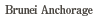
<style>
.page{position:relative;width:97px;height:18px;background:#ffffff}
.page>*{position:absolute;margin:0}
.t1{font:12px "RyuminPro-ExBold";letter-spacing:-0.04em;color:#4c4843;scale:0.9 1}
</style>
<div class="page">
<p class="t1" style="left:5px;top:5px;width:88px;height:11px">Brunei Anchorage</p>
</div>
